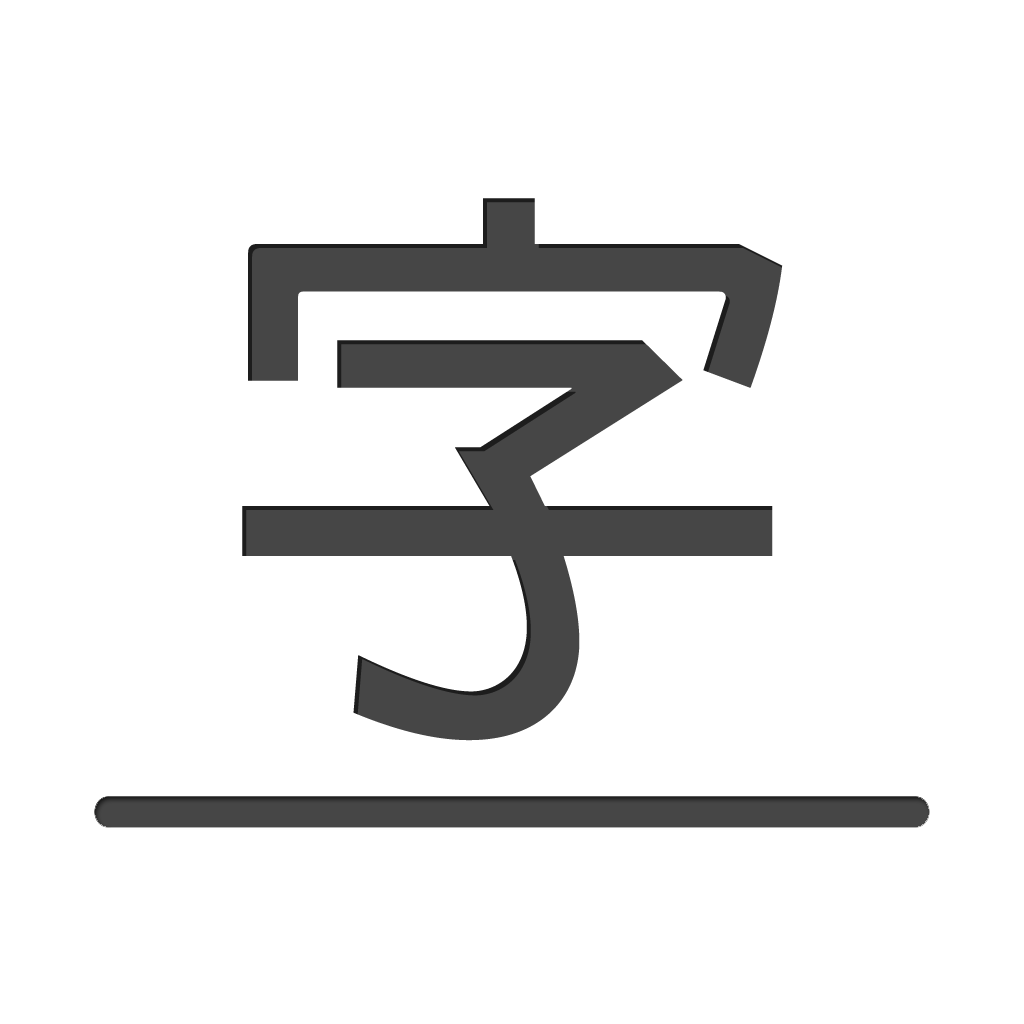
<style>
.page{position:relative;width:1024px;height:1024px;background:#ffffff}
.page>*{position:absolute;margin:0}
.t1{font:585.5px "AdobeFanHeitiStd-Bold";color:#464646}
</style>
<div class="page">
<p class="t1" style="left:242px;top:198px;width:541px;height:543px">字</p>
</div>
